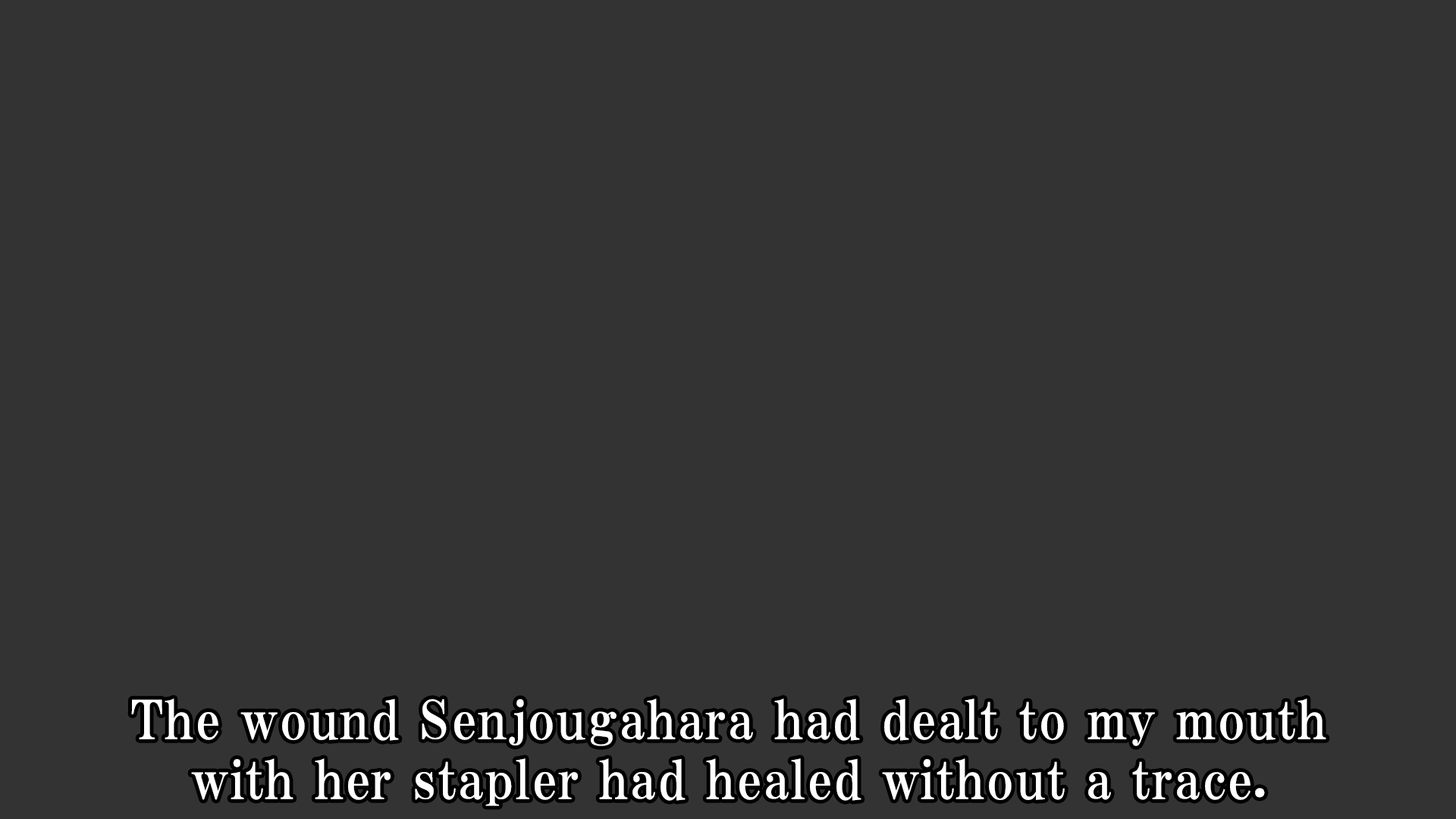
<style>
.page{position:relative;width:1456px;height:819px;background:#333333}
.page>*{position:absolute;margin:0}
.t1{font:53.1px/59.9px "HGPMinchoE";letter-spacing:0.025em;color:#ffffff}
</style>
<div class="page">
<p class="t1" style="left:131px;top:698px;width:1195px;height:108px;text-align:center">The wound Senjougahara had dealt to my mouth<br>with her stapler had healed without a trace.</p>
</div>
